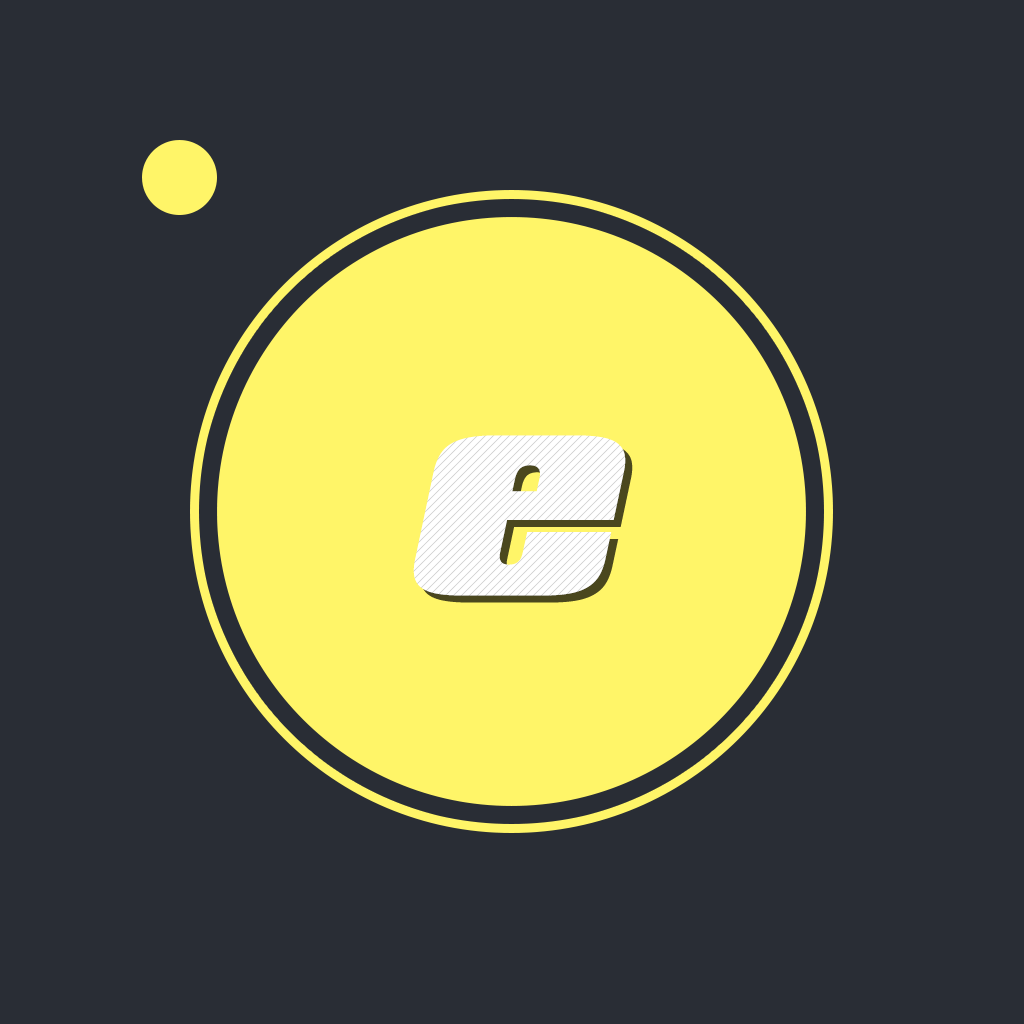
<style>
.page{position:relative;width:1024px;height:1024px;background:#292d35}
.page>*{position:absolute;margin:0}
.t1{font:249px "PadalomaItalic";color:#ffffff}
</style>
<div class="page">
<p class="t1" style="left:413px;top:435px;width:213px;height:161px">e</p>
</div>
